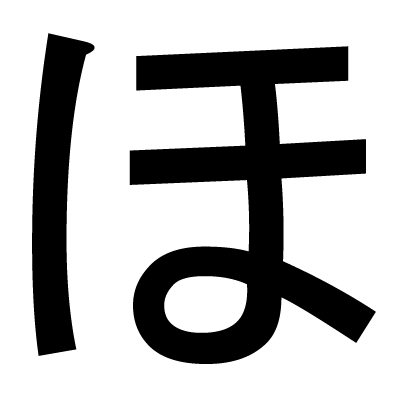
<style>
.page{position:relative;width:400px;height:400px;background:#ffffff}
.page>*{position:absolute;margin:0}
.t1{font:416.7px "MS-PGothic";color:#000000}
</style>
<div class="page">
<p class="t1" style="left:32px;top:33px;width:344px;height:331px">ほ</p>
</div>
